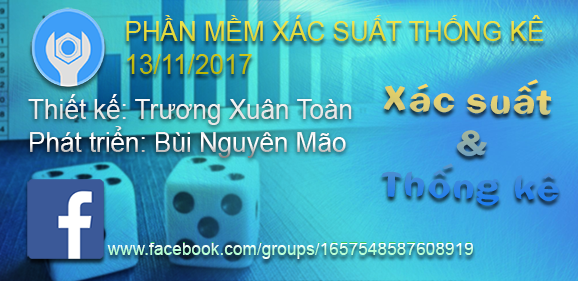
<style>
.page{position:relative;width:578px;height:281px}
.page>*{position:absolute;margin:0}
.t1{font:27.6px "ArialMT";color:#e4da3a;scale:0.94 1}
.t2{font:35.8px "Circle";scale:0.95 1}
.t3{font:27.6px "ArialMT";color:#eeeeee;scale:0.94 1}
.t4{font:18.4px "ArialMT";scale:0.94 1}
</style>
<div class="page">
<p class="t1" style="left:126px;top:15px;width:418px;height:59px">PHẦN MỀM XÁC SUẤT THỐNG KÊ<br>13/11/2017</p>
<p class="t2" style="left:381px;top:79px;width:178px;height:127px;text-align:center;rotate:1deg">Xác suất <br>&amp;<br>Thống kê</p>
<p class="t3" style="left:28px;top:94px;width:324px;height:64px">Thiết kế: Trương Xuân Toàn<br>Phát triển: Bùi Nguyên Mão</p>
<p class="t4" style="left:107px;top:242px;width:366px;height:17px">www.facebook.com/groups/1657548587608919</p>
</div>
